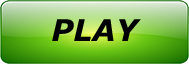
<style>
.page{position:relative;width:189px;height:64px}
.page>*{position:absolute;margin:0}
.t1{font:30px "Verdana-BoldItalic";color:#000000}
</style>
<div class="page">
<p class="t1" style="left:52px;top:19px;width:89px;height:22px">PLAY</p>
</div>
